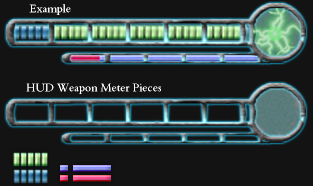
<style>
.page{position:relative;width:313px;height:186px;background:#131313}
.page>*{position:absolute;margin:0}
.t1{font:12px "TraditionalArabic";color:#ffffff}
</style>
<div class="page">
<p class="t1" style="left:29px;top:4px;width:42px;height:11px">Example</p>
<p class="t1" style="left:26px;top:83px;width:135px;height:11px">HUD Weapon Meter Pieces</p>
</div>
